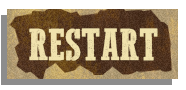
<style>
.page{position:relative;width:186px;height:90px;background:#ffffff}
.page>*{position:absolute;margin:0}
.t1{font:46.7px "WesternBangBang";color:#f0e2ad}
</style>
<div class="page">
<p class="t1" style="left:29px;top:27px;width:129px;height:34px">RESTART</p>
</div>
